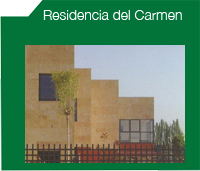
<style>
.page{position:relative;width:200px;height:171px;background:#027339}
.page>*{position:absolute;margin:0}
.t1{font:14px "HelveticaNeue-Light";color:#ffffff}
</style>
<div class="page">
<p class="t1" style="left:43px;top:10px;width:139px;height:10px">Residencia del Carmen</p>
</div>
